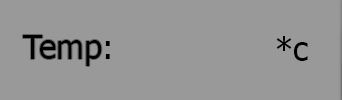
<style>
.page{position:relative;width:342px;height:100px;background:#999999}
.page>*{position:absolute;margin:0}
.t1{font:33px "Tahoma";color:#000000}
</style>
<div class="page">
<p class="t1" style="left:23px;top:35px;width:79px;height:31px">Temp</p>
<p class="t1" style="left:105px;top:41px;width:5px;height:18px">:</p>
<p class="t1" style="left:276px;top:36px;width:32px;height:25px">c*</p>
</div>
